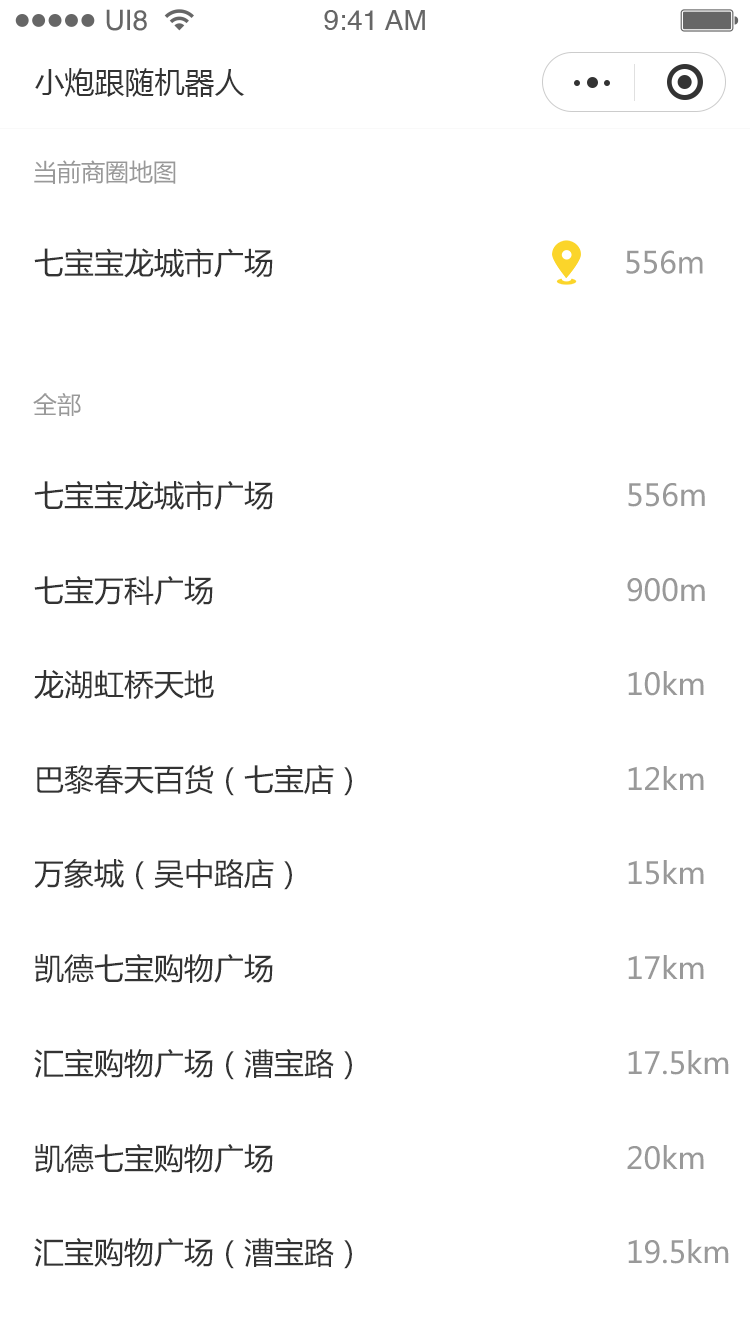
<style>
.page{position:relative;width:750px;height:1333px;background:#ffffff}
.page>*{position:absolute;margin:0}
.t1{font:28.1px "Helvetica";color:#666666}
.t2{font:30px "MicrosoftYaHei";color:#333333}
.t3{font:24px "MicrosoftYaHei";color:#999999}
.t4{font:30px "MicrosoftYaHei";color:#999999}
</style>
<div class="page">
<p class="t1" style="left:106px;top:9px;width:41px;height:22px">UI8</p>
<p class="t1" style="left:324px;top:10px;width:101px;height:20px">9:41 AM</p>
<p class="t2" style="left:35px;top:68px;width:210px;height:29px">小炮跟随机器人</p>
<p class="t3" style="left:34px;top:160px;width:142px;height:24px">当前商圈地图</p>
<p class="t2" style="left:34px;top:248px;width:239px;height:30px">七宝宝龙城市广场</p>
<p class="t4" style="left:626px;top:250px;width:77px;height:24px">556m</p>
<p class="t3" style="left:33px;top:393px;width:48px;height:23px">全部</p>
<p class="t2" style="left:34px;top:480px;width:239px;height:30px">七宝宝龙城市广场</p>
<p class="t4" style="left:628px;top:483px;width:77px;height:24px">556m</p>
<p class="t2" style="left:34px;top:576px;width:179px;height:29px">七宝万科广场</p>
<p class="t4" style="left:627px;top:578px;width:78px;height:24px">900m</p>
<p class="t2" style="left:34px;top:670px;width:180px;height:30px">龙湖虹桥天地</p>
<p class="t4" style="left:628px;top:671px;width:76px;height:25px">10km</p>
<p class="t2" style="left:37px;top:764px;width:315px;height:32px">巴黎春天百货（七宝店）</p>
<p class="t4" style="left:628px;top:766px;width:76px;height:24px">12km</p>
<p class="t2" style="left:34px;top:858px;width:258px;height:32px">万象城（吴中路店）</p>
<p class="t4" style="left:628px;top:860px;width:76px;height:25px">15km</p>
<p class="t2" style="left:35px;top:954px;width:238px;height:29px">凯德七宝购物广场</p>
<p class="t4" style="left:628px;top:955px;width:76px;height:24px">17km</p>
<p class="t2" style="left:34px;top:1049px;width:318px;height:31px">汇宝购物广场（漕宝路）</p>
<p class="t4" style="left:628px;top:1050px;width:101px;height:25px">17.5km</p>
<p class="t2" style="left:35px;top:1144px;width:238px;height:29px">凯德七宝购物广场</p>
<p class="t4" style="left:627px;top:1145px;width:77px;height:25px">20km</p>
<p class="t2" style="left:34px;top:1238px;width:318px;height:31px">汇宝购物广场（漕宝路）</p>
<p class="t4" style="left:628px;top:1239px;width:101px;height:25px">19.5km</p>
</div>
